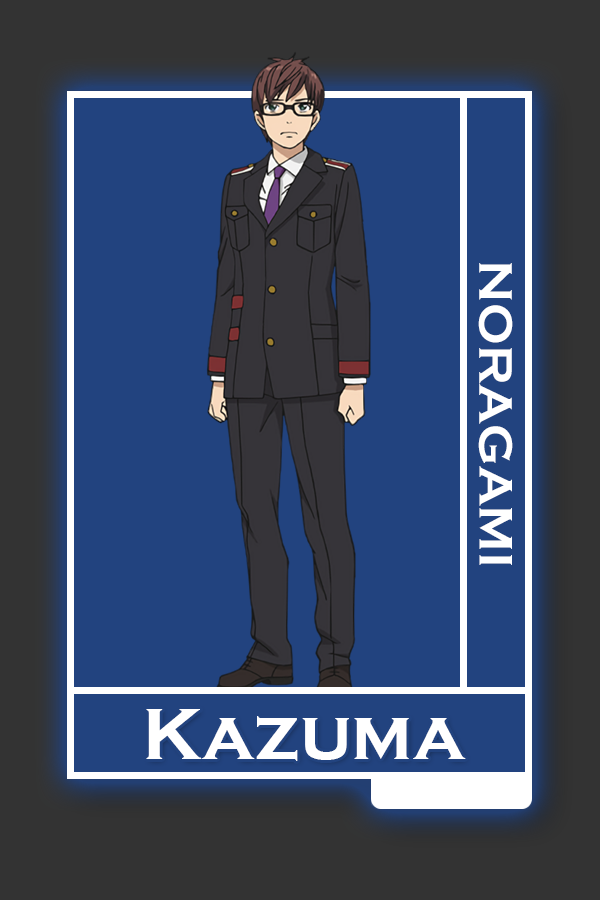
<style>
.page{position:relative;width:600px;height:900px;background:#22437f}
.page>*{position:absolute;margin:0}
.t1{font:48.8px "CopperplateGothic-Bold";color:#ffffff}
.t2{font:75px "CopperplateGothic-Bold";color:#ffffff}
</style>
<div class="page">
<p class="t1" style="left:478px;top:263px;width:35px;height:302px;rotate:90deg">NORAGAMI</p>
<p class="t2" style="left:146px;top:709px;width:320px;height:52px">Kazuma</p>
</div>
